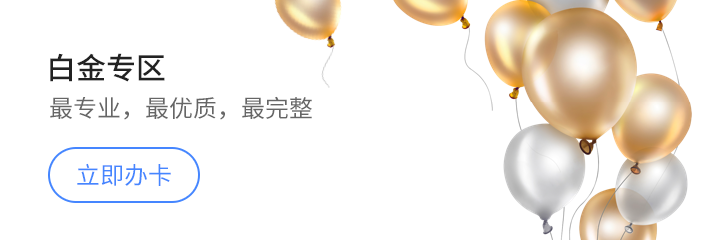
<style>
.page{position:relative;width:710px;height:240px;background:#ffffff}
.page>*{position:absolute;margin:0}
.t1{font:30px "SourceHanSansCN-Medium";color:#222222}
.t2{font:24px "SourceHanSansCN-Regular";color:#666666}
.t3{font:24px "SourceHanSansCN-Regular";color:#4586ff}
</style>
<div class="page">
<p class="t1" style="left:50px;top:53px;width:115px;height:29px">白金专区</p>
<p class="t2" style="left:50px;top:96px;width:262px;height:24px">最专业，最优质，最完整</p>
<p class="t3" style="left:77px;top:163px;width:94px;height:23px">立即办卡</p>
</div>
